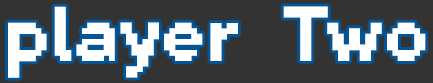
<style>
.page{position:relative;width:433px;height:83px;background:#333333}
.page>*{position:absolute;margin:0}
.t1{font:80px "Planes_ValMore-Bold";color:#ffffff}
</style>
<div class="page">
<p class="t1" style="left:8px;top:6px;width:418px;height:72px">player Two</p>
</div>
